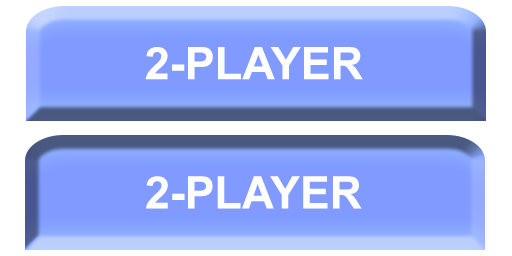
<style>
.page{position:relative;width:512px;height:256px;background:#809aff}
.page>*{position:absolute;margin:0}
.t1{font:45px "Arial-BoldMT";color:#fffefe}
.t2{font:45px "Arial-BoldMT";color:#ffffff}
</style>
<div class="page">
<p class="t1" style="left:145px;top:47px;width:218px;height:33px">2-PLAYER</p>
<p class="t2" style="left:146px;top:176px;width:216px;height:33px">2-PLAYER</p>
</div>
